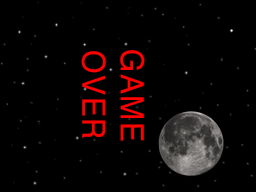
<style>
.page{position:relative;width:256px;height:192px;background:#000000}
.page>*{position:absolute;margin:0}
.t1{font:32.1px "Helvetica";letter-spacing:0.05em;color:#ff0000;scale:0.94 1}
</style>
<div class="page">
<p class="t1" style="left:81px;top:50px;width:64px;height:91px;text-align:center;rotate:90deg">GAME<br>OVER</p>
</div>
